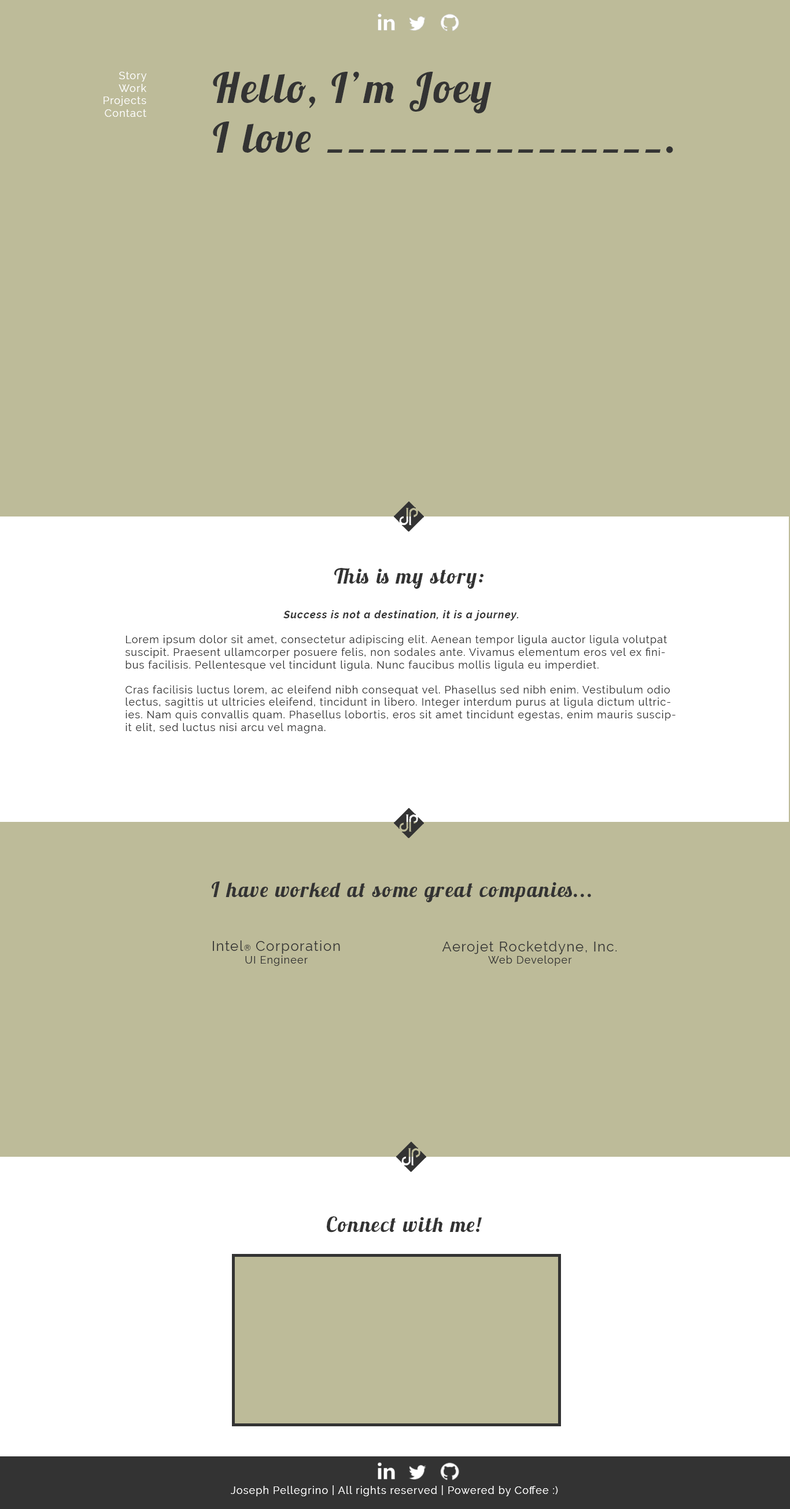
<style>
.page{position:relative;width:790px;height:1509px;background:#bdbb99}
.page>*{position:absolute;margin:0}
.t1{font:10.4px "Raleway-Regular";letter-spacing:0.065em;color:#ffffff}
.t2{font:41.6px "Lobster1.3";letter-spacing:0.065em;color:#333333}
.t3{font:20.8px "Lobster1.3";letter-spacing:0.065em;color:#333333}
.t4{font:10.4px "Raleway-Regular";letter-spacing:0.065em;color:#333333}
.t5{font:10.4px "Raleway-BoldItalic";letter-spacing:0.065em;color:#333333}
.t6{font:13.9px "Raleway-Regular";letter-spacing:0.065em;color:#333333}
.t7{font:8.1px "Raleway-Regular";letter-spacing:0.065em;color:#333333}
.t8{font:8.1px "Lobster1.3";letter-spacing:0.065em;color:#ffffff}
</style>
<div class="page">
<p class="t1" style="left:104px;top:72px;width:43px;height:45px;text-align:right">Story<br>Work<br>Projects<br>Contact</p>
<p class="t2" style="left:213px;top:72px;width:460px;height:81px">Hello, I’m Joey<br>I love ________________.</p>
<p class="t3" style="left:334px;top:568px;width:150px;height:21px">This is my story:</p>
<p class="t4" style="left:125px;top:610px;width:551px;height:123px;text-align:center"><span class="t5">Success is not a destination, it is a journey.<br><br></span>Lorem ipsum dolor sit amet, consectetur adipiscing elit. Aenean tempor ligula auctor ligula volutpat suscipit. Praesent ullamcorper posuere felis, non sodales ante. Vivamus elementum eros vel ex finibus facilisis. Pellentesque vel tincidunt ligula. Nunc faucibus mollis ligula eu imperdiet. <br><br>Cras facilisis luctus lorem, ac eleifend nibh consequat vel. Phasellus sed nibh enim. Vestibulum odio lectus, sagittis ut ultricies eleifend, tincidunt in libero. Integer interdum purus at ligula dictum ultricies. Nam quis convallis quam. Phasellus lobortis, eros sit amet tincidunt egestas, enim mauris suscipit elit, sed luctus nisi arcu vel magna.</p>
<p class="t3" style="left:212px;top:882px;width:379px;height:20px">I have worked at some great companies...</p>
<p class="t6" style="left:213px;top:941px;width:127px;height:25px;text-align:center">Intel<span class="t7">®</span> Corporation<br><span class="t4">UI Engineer</span></p>
<p class="t6" style="left:442px;top:941px;width:175px;height:25px;text-align:center">Aerojet Rocketdyne, Inc.<br><span class="t4">Web Developer</span></p>
<p class="t3" style="left:327px;top:1216px;width:155px;height:17px">Connect with me!</p>
<p class="t1" style="left:231px;top:1485px;width:327px;height:11px"><span class="t8"><br><br><br></span>Joseph Pellegrino | All rights reserved | Powered by Coffee :)</p>
</div>
